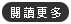
<style>
.page{position:relative;width:71px;height:24px;background:#313131}
.page>*{position:absolute;margin:0}
.t1{font:12px "MicrosoftJhengHeiRegular";letter-spacing:0.1em;color:#ffffff}
</style>
<div class="page">
<p class="t1" style="left:11px;top:7px;width:50px;height:11px">閱讀更多</p>
</div>
